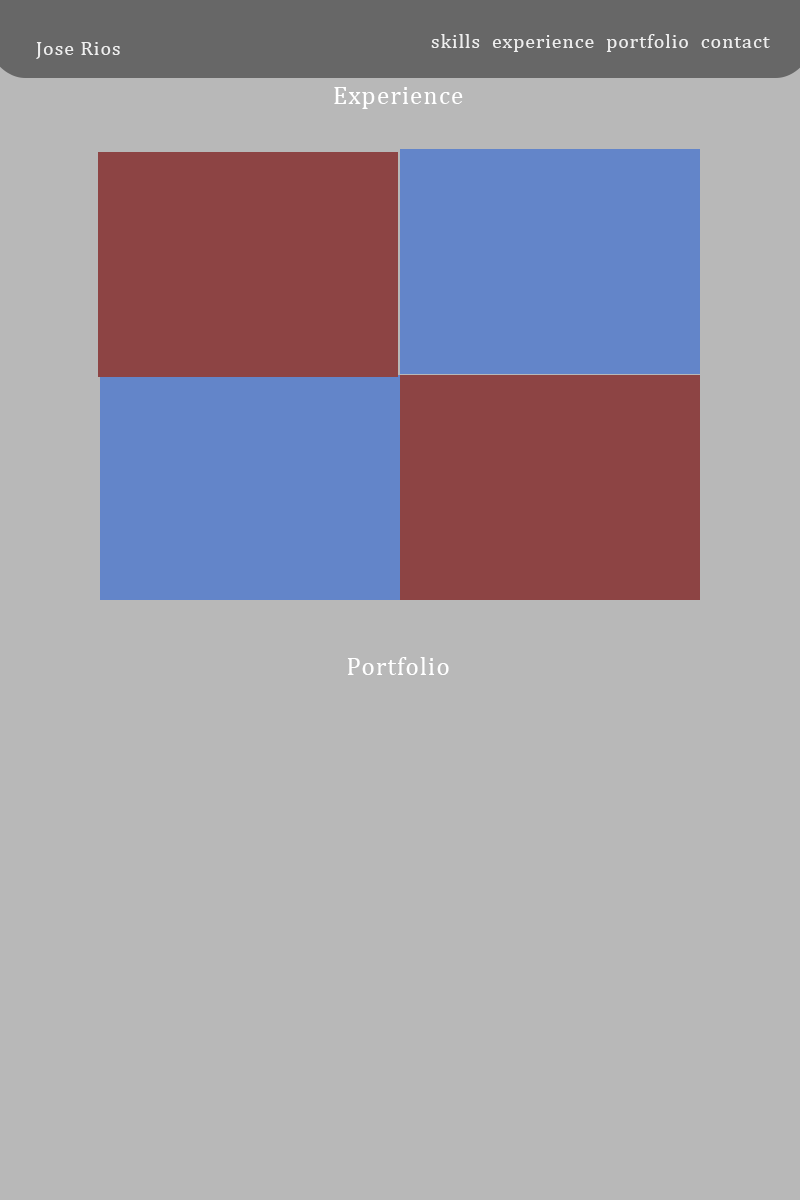
<style>
.page{position:relative;width:800px;height:1200px;background:#b8b8b8}
.page>*{position:absolute;margin:0}
.t1{font:20px "Cambria";letter-spacing:0.05em;color:#eeeeee}
.t2{font:25px "Cambria";letter-spacing:0.05em;color:#ffffff}
</style>
<div class="page">
<p class="t1" style="left:431px;top:34px;width:339px;height:18px">skills  experience  portfolio  contact</p>
<p class="t1" style="left:36px;top:42px;width:84px;height:17px">Jose Rios</p>
<p class="t2" style="left:334px;top:87px;width:129px;height:22px">Experience</p>
<p class="t2" style="left:347px;top:657px;width:102px;height:18px">Portfolio</p>
</div>
